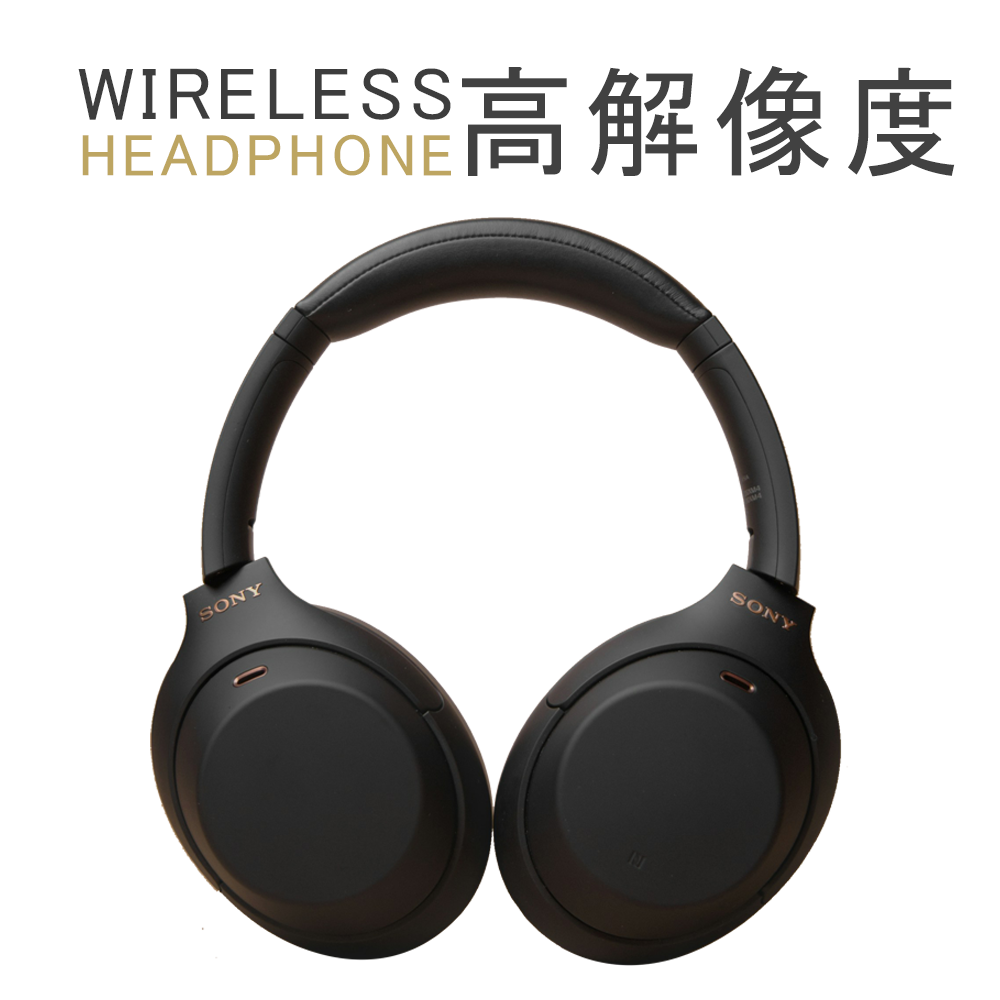
<style>
.page{position:relative;width:1000px;height:1000px;background:#ffffff}
.page>*{position:absolute;margin:0}
.t1{font:75px "MS-PGothic";letter-spacing:0.075em;color:#3d3d3d}
.t2{font:120px "MS-PGothic";letter-spacing:0.075em;color:#414141}
.t3{font:60px "MS-PGothic";letter-spacing:0.075em;color:#bda561}
</style>
<div class="page">
<p class="t1" style="left:78px;top:68px;width:373px;height:52px">WIRELESS</p>
<p class="t2" style="left:462px;top:66px;width:493px;height:111px">高解像度</p>
<p class="t3" style="left:82px;top:134px;width:369px;height:42px">HEADPHONE</p>
</div>
